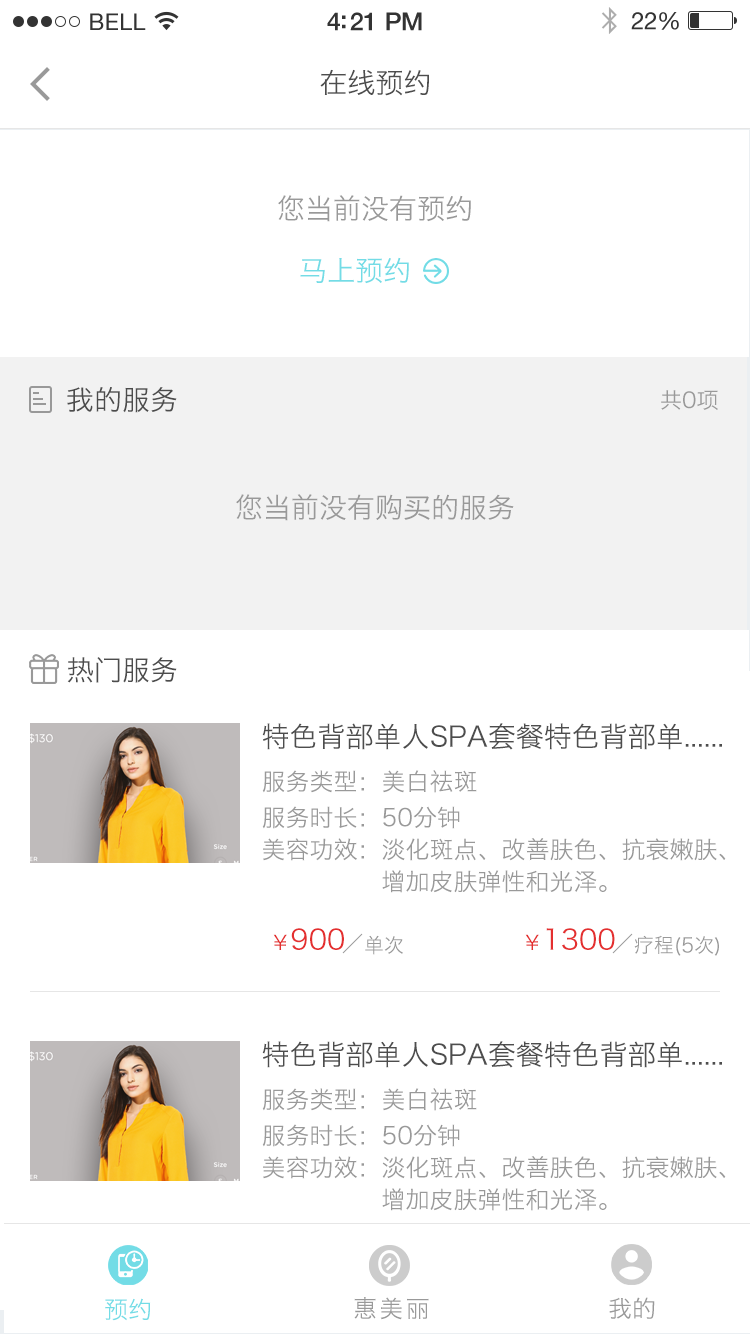
<style>
.page{position:relative;width:750px;height:1334px;background:#ffffff}
.page>*{position:absolute;margin:0}
.t1{font:28px "HiraginoSansGB-W3";color:#4d4d4d}
.t2{font:28px "HiraginoSansGB-W3";color:#999999}
.t3{font:28px "HiraginoSansGB-W3";color:#73dce6}
.t4{font:28px "HiraginoSansGB-W3";color:#4c4c4c}
.t5{font:22px "HiraginoSansGB-W3";color:#999999}
.t6{font:24px/32px "HiraginoSansGB-W3";color:#999999}
.t7{font:24px/36px "HiraginoSansGB-W3";color:#999999}
.t8{font:28px "HiraginoSansGB-W3";color:#e42f2f}
.t9{font:20px "HiraginoSansGB-W3";color:#999999}
.t10{font:20px "HiraginoSansGB-W3";color:#e42f2f}
.t11{font:24px "HiraginoSansGB-W3";color:#73dce6}
.t12{font:24px "HiraginoSansGB-W3";letter-spacing:0.1em;color:#999999}
.t13{font:24px "HiraginoSansGB-W3";color:#999999}
</style>
<div class="page">
<p class="t1" style="left:320px;top:69px;width:109px;height:27px">在线预约</p>
<p class="t2" style="left:278px;top:195px;width:193px;height:27px">您当前没有预约</p>
<p class="t3" style="left:300px;top:257px;width:109px;height:27px">马上预约</p>
<p class="t4" style="left:67px;top:387px;width:110px;height:26px">我的服务</p>
<p class="t5" style="left:661px;top:390px;width:57px;height:20px">共0项</p>
<p class="t2" style="left:236px;top:494px;width:278px;height:27px">您当前没有购买的服务</p>
<p class="t4" style="left:67px;top:657px;width:110px;height:26px">热门服务</p>
<p class="t1" style="left:262px;top:723px;width:460px;height:27px">特色背部单人SPA套餐特色背部单......</p>
<p class="t6" style="left:262px;top:770px;width:464px;height:123px;text-align:justify"><span class="t7">服务类型：美白祛斑<br>服务时长：50分钟<br></span>美容功效：淡化斑点、改善肤色、抗衰嫩肤、<br>               增加皮肤弹性和光泽。</p>
<p class="t8" style="left:273px;top:928px;width:71px;height:22px"><span class="t9">                                        </span><span class="t10">￥</span>900</p>
<p class="t8" style="left:525px;top:928px;width:90px;height:22px"><span class="t9">                                        </span><span class="t10">￥</span>1300</p>
<p class="t9" style="left:365px;top:935px;width:38px;height:20px">单次</p>
<p class="t9" style="left:634px;top:935px;width:85px;height:21px">疗程(5次)</p>
<p class="t1" style="left:262px;top:1041px;width:460px;height:27px">特色背部单人SPA套餐特色背部单......</p>
<p class="t6" style="left:262px;top:1088px;width:464px;height:123px;text-align:justify"><span class="t7">服务类型：美白祛斑<br>服务时长：50分钟<br></span>美容功效：淡化斑点、改善肤色、抗衰嫩肤、<br>               增加皮肤弹性和光泽。</p>
<p class="t11" style="left:105px;top:1298px;width:46px;height:23px">预约</p>
<p class="t12" style="left:354px;top:1297px;width:75px;height:23px">惠美丽</p>
<p class="t13" style="left:609px;top:1297px;width:46px;height:22px">我的</p>
</div>
